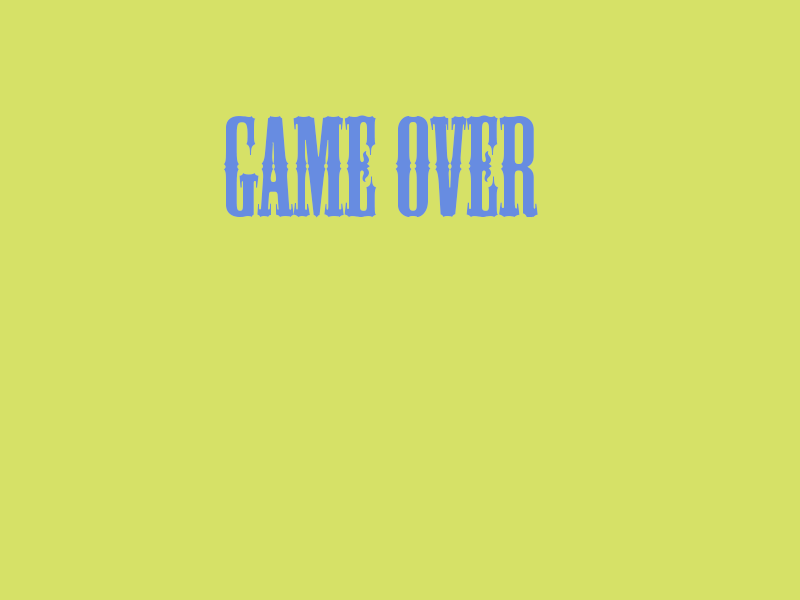
<style>
.page{position:relative;width:800px;height:600px;background:#d6e167}
.page>*{position:absolute;margin:0}
.t1{font:132px "MesquiteStd";color:#678de2}
</style>
<div class="page">
<p class="t1" style="left:223px;top:115px;width:315px;height:103px">Game over</p>
</div>
